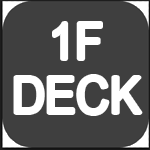
<style>
.page{position:relative;width:150px;height:150px;background:#3f3f3f}
.page>*{position:absolute;margin:0}
.t1{font:50px/54px "ArialMT";color:#ffffff;scale:0.93 1}
</style>
<div class="page">
<p class="t1" style="left:15px;top:23px;width:126px;height:91px;text-align:center">1F<br>DECK</p>
</div>
